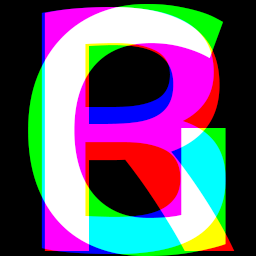
<style>
.page{position:relative;width:256px;height:256px;background:#000000}
.page>*{position:absolute;margin:0}
.t1{font:348.9px "Ubuntu-Medium"}
</style>
<div class="page">
<p class="t1" style="left:28px;top:4px;width:198px;height:252px">G</p>
<p class="t1" style="left:41px;top:7px;width:185px;height:247px">B</p>
<p class="t1" style="left:44px;top:7px;width:191px;height:244px">R</p>
</div>
